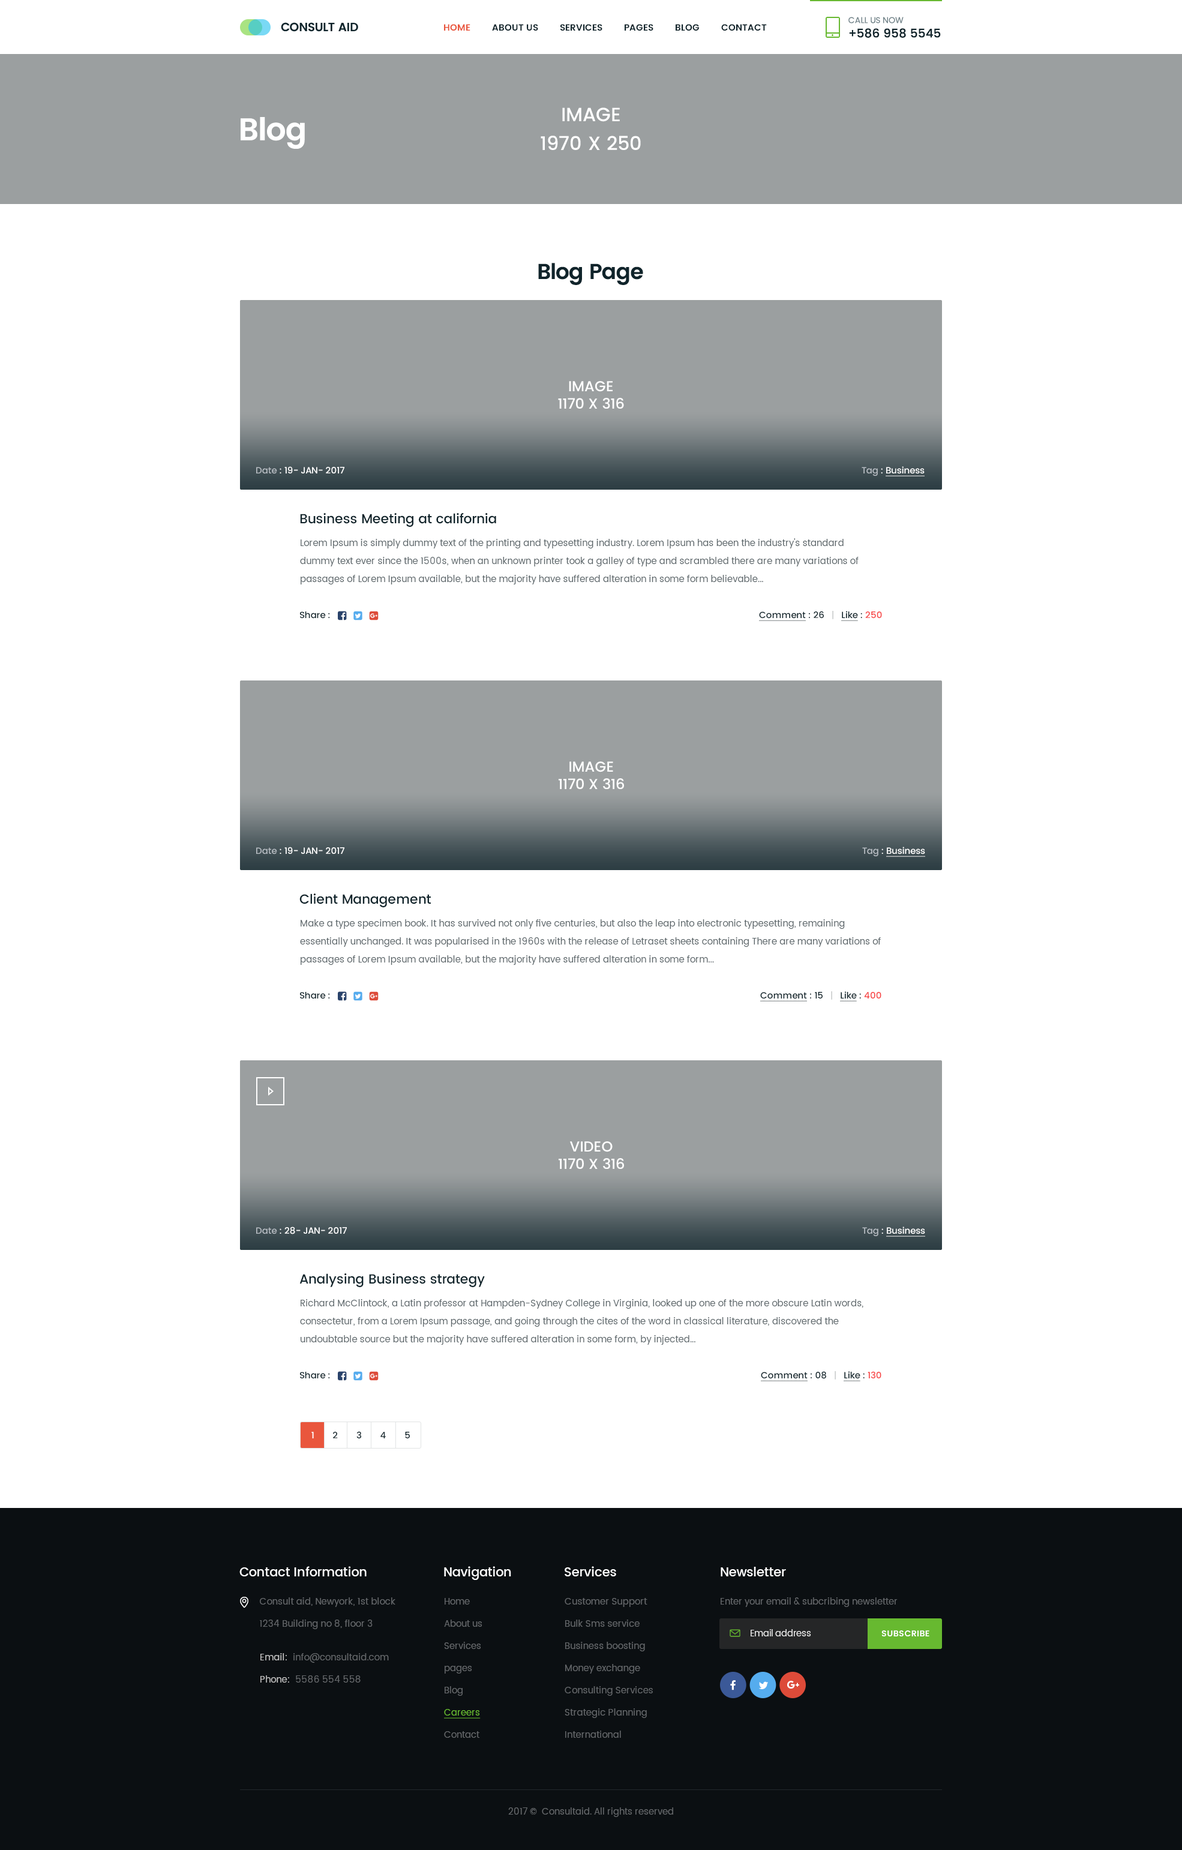
<style>
.page{position:relative;width:1182px;height:1850px;background:#ffffff}
.page>*{position:absolute;margin:0}
.t1{font:12px "Poppins-Medium";letter-spacing:-0.005em;color:#10242b;text-transform:uppercase}
.t2{font:8.4px "Poppins-Regular";letter-spacing:-0.005em;color:#718389;text-transform:uppercase}
.t3{font:9px "Poppins-SemiBold";color:#10242b;text-transform:uppercase}
.t4{font:9px "Poppins-SemiBold";color:#e9563d;text-transform:uppercase}
.t5{font:19.2px/28.8px "Poppins-Medium";color:#ffffff;text-transform:uppercase}
.t6{font:31.3px "Poppins-SemiBold";letter-spacing:-0.03em;color:#ffffff}
.t7{font:21.6px "Poppins-SemiBold";letter-spacing:-0.03em;color:#10242b}
.t8{font:14.4px "Poppins-Medium";color:#ffffff;text-transform:uppercase}
.t9{font:9px "Poppins-Medium";letter-spacing:-0.01em;color:#ffffff}
.t10{font:9px "Poppins-Medium";letter-spacing:-0.01em;color:#b5bbc1}
.t11{font:9px "Poppins-Medium";letter-spacing:-0.01em;color:#ffffff;text-decoration:underline}
.t12{font:13.2px "Poppins-Medium";letter-spacing:-0.01em;color:#10242b}
.t13{font:9px/18px "Poppins-Regular";letter-spacing:0.01em;color:#5c666a}
.t14{font:9px "Poppins-Medium";letter-spacing:-0.01em;color:#10242b}
.t15{font:9px "Poppins-Medium";letter-spacing:-0.01em;color:#10242b;text-decoration:underline}
.t16{font:9px "Poppins-Medium";letter-spacing:-0.01em;color:#cccece}
.t17{font:9px "Poppins-Medium";letter-spacing:-0.01em;color:#f74242}
.t18{font:12.6px "Poppins-Medium";letter-spacing:-0.01em;color:#ffffff}
.t19{font:9px/22.2px "Poppins-Regular";letter-spacing:0.01em;color:#64676a}
.t20{font:9px/22.2px "Poppins-Regular";color:#64676a}
.t21{font:9px/22.2px "Poppins-Regular";color:#67b930;text-decoration:underline}
.t22{font:9px "Poppins-Regular";color:#64676a}
.t23{font:8.7px "Poppins-Regular";color:#ececec}
.t24{font:8.4px "Poppins-SemiBold";letter-spacing:0.025em;color:#ffffff;text-transform:uppercase}
.t25{font:9px/22.2px "Poppins-Regular";letter-spacing:0.01em;color:#c5c5c5}
.t26{font:9px/22.2px "Poppins-Regular";letter-spacing:0.01em;color:#c4c4c4}
</style>
<div class="page">
<p class="t1" style="left:848px;top:17px;width:93px;height:21px"><span class="t2">Call us now<br></span>+586 958 5545</p>
<p class="t3" style="left:444px;top:24px;width:323px;height:7px"><span class="t4">Home</span>         about us         services         Pages         blog         contact</p>
<p class="t5" style="left:541px;top:107px;width:100px;height:43px;text-align:center">Image<br>1970 x 250</p>
<p class="t6" style="left:241px;top:117px;width:64px;height:32px">Blog</p>
<p class="t7" style="left:538px;top:263px;width:105px;height:22px">Blog Page</p>
<p class="t8" style="left:558px;top:381px;width:66px;height:28px;text-align:center">Image<br>1170 x 316</p>
<p class="t9" style="left:256px;top:466px;width:88px;height:8px"><span class="t10">Date </span>: 19- JAN- 2017</p>
<p class="t11" style="left:862px;top:466px;width:63px;height:10px"><span class="t10">Tag</span><span class="t9"> : </span>Business</p>
<p class="t12" style="left:300px;top:513px;width:196px;height:14px">Business Meeting at california</p>
<p class="t13" style="left:300px;top:538px;width:559px;height:46px">Lorem Ipsum is simply dummy text of the printing and typesetting industry. Lorem Ipsum has been the industry's standard dummy text ever since the 1500s, when an unknown printer took a galley of type and scrambled there are many variations of passages of Lorem Ipsum available, but the majority have suffered alteration in some form believable...</p>
<p class="t14" style="left:300px;top:611px;width:30px;height:8px">Share :</p>
<p class="t15" style="left:759px;top:611px;width:123px;height:10px">Comment<span class="t14"> : 26   </span><span class="t16">|   </span>Like<span class="t14"> : </span><span class="t17">250</span></p>
<p class="t8" style="left:559px;top:761px;width:65px;height:28px;text-align:center">Image<br>1170 x 316</p>
<p class="t9" style="left:256px;top:847px;width:88px;height:7px"><span class="t10">Date </span>: 19- JAN- 2017</p>
<p class="t11" style="left:862px;top:847px;width:63px;height:10px"><span class="t10">Tag</span><span class="t9"> : </span>Business</p>
<p class="t12" style="left:299px;top:893px;width:132px;height:14px">Client Management</p>
<p class="t13" style="left:300px;top:919px;width:581px;height:46px">Make a type specimen book. It has survived not only five centuries, but also the leap into electronic typesetting, remaining essentially unchanged. It was popularised in the 1960s with the release of Letraset sheets containing There are many variations of passages of Lorem Ipsum available, but the majority have suffered alteration in some form...<br>words which don't look even slightly believable...</p>
<p class="t14" style="left:300px;top:992px;width:30px;height:7px">Share :</p>
<p class="t15" style="left:760px;top:991px;width:121px;height:10px">Comment<span class="t14"> : 15   </span><span class="t16">|   </span>Like<span class="t14"> : </span><span class="t17">400</span></p>
<p class="t8" style="left:559px;top:1141px;width:65px;height:28px;text-align:center">video<br>1170 x 316</p>
<p class="t9" style="left:256px;top:1226px;width:91px;height:8px"><span class="t10">Date </span>: 28- JAN- 2017</p>
<p class="t11" style="left:862px;top:1226px;width:63px;height:11px"><span class="t10">Tag</span><span class="t9"> : </span>Business</p>
<p class="t12" style="left:299px;top:1273px;width:186px;height:14px">Analysing Business strategy</p>
<p class="t13" style="left:300px;top:1299px;width:563px;height:46px">Richard McClintock, a Latin professor at Hampden-Sydney College in Virginia, looked up one of the more obscure Latin words, consectetur, from a Lorem Ipsum passage, and going through the cites of the word in classical literature, discovered the undoubtable source but the majority have suffered alteration in some form, by injected...</p>
<p class="t14" style="left:300px;top:1372px;width:30px;height:7px">Share :</p>
<p class="t15" style="left:761px;top:1371px;width:120px;height:10px">Comment<span class="t14"> : 08   </span><span class="t16">|   </span>Like<span class="t14"> : </span><span class="t17">130</span></p>
<p class="t14" style="left:311px;top:1431px;width:99px;height:7px"><span class="t9">1</span>        2        3        4        5</p>
<p class="t18" style="left:239px;top:1566px;width:128px;height:10px">Contact Information</p>
<p class="t18" style="left:444px;top:1566px;width:67px;height:14px">Navigation</p>
<p class="t18" style="left:565px;top:1566px;width:51px;height:10px">Services</p>
<p class="t18" style="left:721px;top:1567px;width:65px;height:9px">Newsletter</p>
<p class="t19" style="left:260px;top:1597px;width:135px;height:32px">Consult aid, Newyork, 1st block <br>1234 Building no 8, floor 3</p>
<p class="t20" style="left:444px;top:1598px;width:38px;height:140px">Home<br>About us<br>Services<br>pages<br>Blog<br><span class="t21">Careers<br></span>Contact</p>
<p class="t19" style="left:565px;top:1598px;width:88px;height:140px">Customer Support<br>Bulk Sms service<br>Business boosting<br>Money exchange<br>Consulting Services<br>Strategic Planning<br>International</p>
<p class="t22" style="left:721px;top:1597px;width:177px;height:10px">Enter your email &amp; subcribing newsletter</p>
<p class="t23" style="left:751px;top:1629px;width:60px;height:7px">Email address</p>
<p class="t24" style="left:881px;top:1630px;width:48px;height:6px">Subscribe</p>
<p class="t19" style="left:260px;top:1653px;width:129px;height:29px"><span class="t25">Email:</span>  info@consultaid.com<br><span class="t26">Phone:</span>  5586 554 558</p>
<p class="t22" style="left:508px;top:1807px;width:165px;height:10px">2017 ©  Consultaid. All rights reserved</p>
</div>
